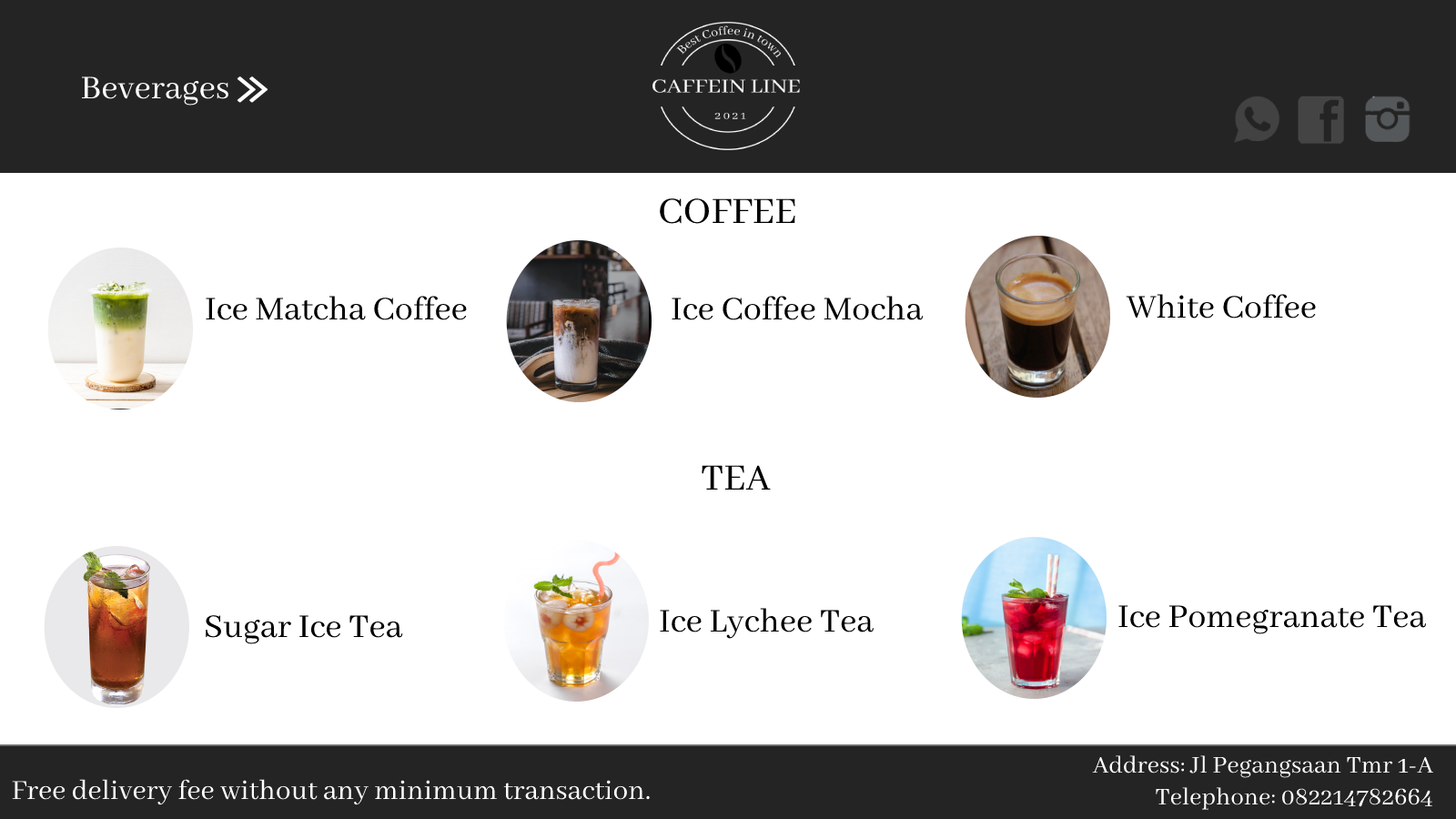
<style>
.page{position:relative;width:1456px;height:819px;background:#ffffff}
.page>*{position:absolute;margin:0}
.t1{font:36.4px "AbhayaLibre-Regular";color:#ffffff}
.t2{font:40.9px "AbhayaLibre-Regular";color:#000000}
.t3{font:36.4px "AbhayaLibre-Regular";color:#000000}
.t4{font:26.5px "AbhayaLibre-Regular";color:#ffffff}
.t5{font:30.3px "AbhayaLibre-Regular";color:#ffffff}
</style>
<div class="page">
<p class="t1" style="left:82px;top:76px;width:146px;height:30px">Beverages</p>
<p class="t2" style="left:660px;top:198px;width:135px;height:26px">COFFEE</p>
<p class="t3" style="left:1126px;top:294px;width:190px;height:24px">White Coffee</p>
<p class="t3" style="left:206px;top:296px;width:261px;height:24px">Ice Matcha Coffee</p>
<p class="t3" style="left:672px;top:296px;width:252px;height:24px">Ice Coffee Mocha</p>
<p class="t2" style="left:702px;top:465px;width:69px;height:25px">TEA</p>
<p class="t3" style="left:1118px;top:605px;width:309px;height:29px">Ice Pomegranate Tea</p>
<p class="t3" style="left:206px;top:615px;width:197px;height:29px">Sugar Ice Tea</p>
<p class="t3" style="left:660px;top:608px;width:214px;height:31px">Ice Lychee Tea</p>
<p class="t4" style="left:1092px;top:755px;width:341px;height:55px;text-align:right">Address: Jl Pegangsaan Tmr 1-A<br>Telephone: 082214782664</p>
<p class="t5" style="left:12px;top:779px;width:638px;height:26px">Free delivery fee without any minimum transaction.</p>
</div>
